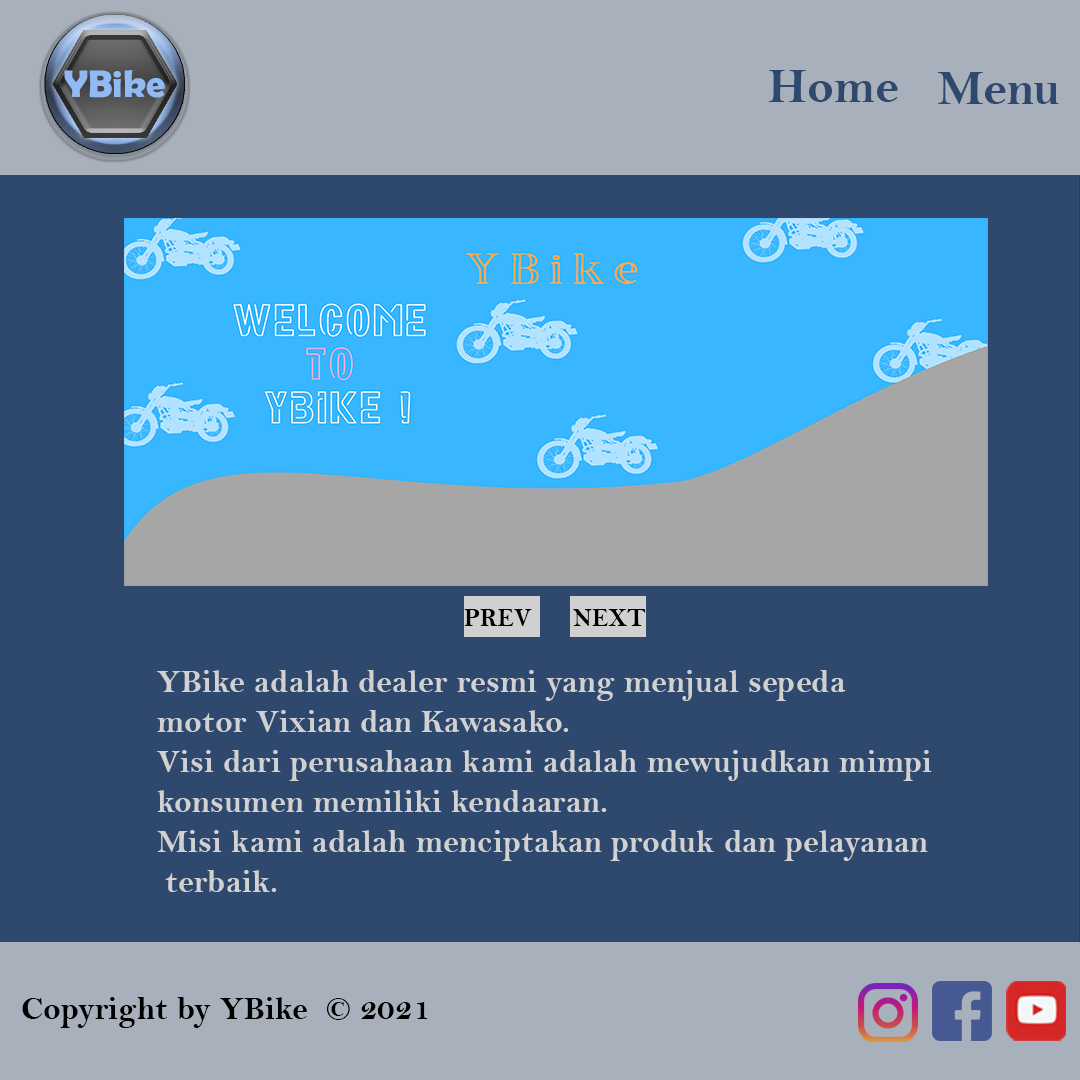
<style>
.page{position:relative;width:1080px;height:1080px;background:#2f496e}
.page>*{position:absolute;margin:0}
.t1{font:38.4px "BerlinSansFBDemi-Bold";color:#91b9f4}
.t2{font:50px "BellMTBold";color:#2f496e}
.t3{font:25px "BellMTBold";color:#000000}
.t4{font:33.3px "BellMTBold";color:#d1d1d1}
.t5{font:33.3px "BellMTBold";color:#000000}
</style>
<div class="page">
<p class="t1" style="left:64px;top:70px;width:101px;height:28px">YBike</p>
<p class="t2" style="left:768px;top:70px;width:130px;height:32px">Home</p>
<p class="t2" style="left:938px;top:72px;width:121px;height:32px">Menu</p>
<p class="t3" style="left:464px;top:609px;width:68px;height:17px">PREV</p>
<p class="t3" style="left:573px;top:609px;width:73px;height:17px">NEXT</p>
<p class="t4" style="left:157px;top:670px;width:775px;height:222px">YBike adalah dealer resmi yang menjual sepeda motor Vixian dan Kawasako.<br>Visi dari perusahaan kami adalah mewujudkan mimpi konsumen memiliki kendaaran.<br>Misi kami adalah menciptakan produk dan pelayanan terbaik.</p>
<p class="t5" style="left:22px;top:997px;width:406px;height:31px">Copyright by YBike  © 2021</p>
</div>
